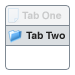
<style>
.page{position:relative;width:75px;height:75px;background:#ffffff}
.page>*{position:absolute;margin:0}
.t1{font:10px "Helvetica-Bold";color:#c9cacb}
.t2{font:10px "Helvetica-Bold";color:#222222}
</style>
<div class="page">
<p class="t1" style="left:22px;top:11px;width:40px;height:9px">Tab One</p>
<p class="t2" style="left:26px;top:31px;width:39px;height:8px">Tab Two</p>
</div>
